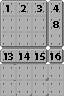
<style>
.page{position:relative;width:64px;height:96px;background:#afafaf}
.page>*{position:absolute;margin:0}
.t1{font:10.7px "MyriadPro-Bold";letter-spacing:-0.05em;color:#000000}
</style>
<div class="page">
<p class="t1" style="left:6px;top:5px;width:3px;height:7px">1</p>
<p class="t1" style="left:21px;top:5px;width:5px;height:7px">2</p>
<p class="t1" style="left:37px;top:5px;width:5px;height:7px">3</p>
<p class="t1" style="left:53px;top:5px;width:6px;height:7px">4</p>
<p class="t1" style="left:53px;top:21px;width:6px;height:7px">8</p>
<p class="t1" style="left:4px;top:53px;width:9px;height:7px">13</p>
<p class="t1" style="left:19px;top:53px;width:11px;height:7px">14</p>
<p class="t1" style="left:35px;top:53px;width:10px;height:7px">15</p>
<p class="t1" style="left:50px;top:53px;width:11px;height:7px">16</p>
</div>
